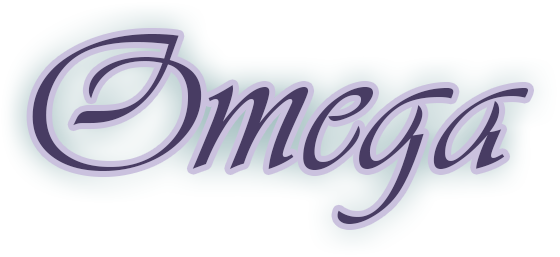
<style>
.page{position:relative;width:560px;height:257px;background:#ffffff}
.page>*{position:absolute;margin:0}
.t1{font:200.1px "Vivaldii";color:#3e315b}
</style>
<div class="page">
<p class="t1" style="left:32px;top:34px;width:496px;height:190px;opacity:0.95">Omega</p>
</div>
